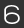
<style>
.page{position:relative;width:24px;height:28px;background:#333333}
.page>*{position:absolute;margin:0}
.t1{font:27.3px "NexaLight";color:#ffffff}
</style>
<div class="page">
<p class="t1" style="left:4px;top:5px;width:16px;height:19px">6</p>
</div>
